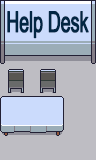
<style>
.page{position:relative;width:96px;height:160px;background:#bebdc3}
.page>*{position:absolute;margin:0}
.t1{font:28.8px "ArialNarrow";letter-spacing:-0.025em;color:#022643;font-weight:bold;scale:0.75 1}
</style>
<div class="page">
<p class="t1" style="left:7px;top:11px;width:82px;height:28px">Help Desk</p>
</div>
